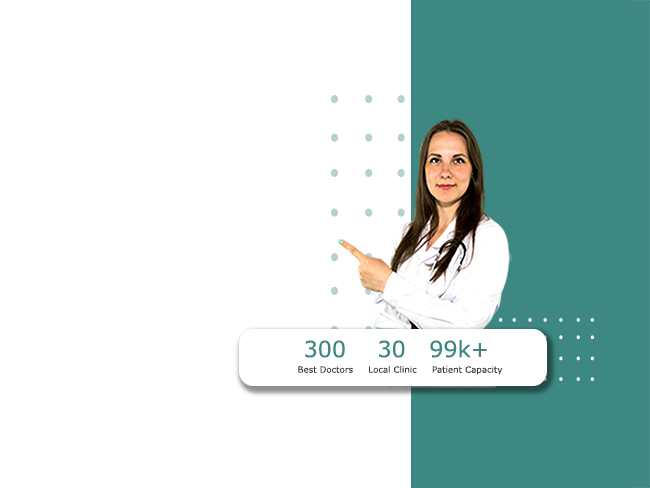
<style>
.page{position:relative;width:650px;height:488px;background:#ffffff}
.page>*{position:absolute;margin:0}
.t1{font:22.3px "VerdanaPro";color:#3d8882}
.t2{font:8.7px "VerdanaPro";color:#3a3b3b}
</style>
<div class="page">
<p class="t1" style="left:305px;top:340px;width:182px;height:18px">300    30   99k+</p>
<p class="t2" style="left:298px;top:366px;width:205px;height:9px">Best Doctors     Local Clinic     Patient Capacity</p>
</div>
